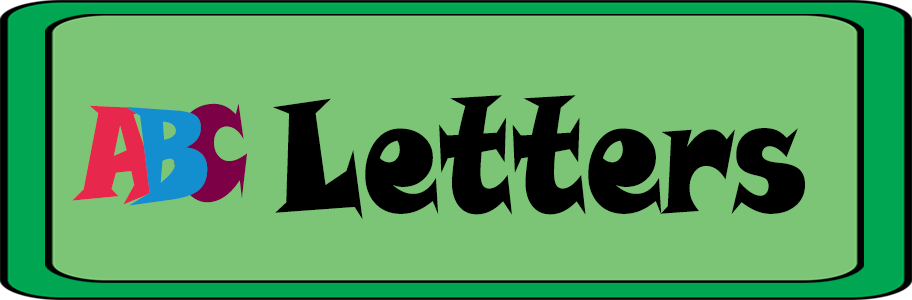
<style>
.page{position:relative;width:912px;height:300px;background:#7cc576}
.page>*{position:absolute;margin:0}
.t1{font:160px "SnapITC-Regular";color:#000000;scale:0.75 1}
.t2{font:130.8px "SnapITC-Regular";color:#e7274b;scale:0.75 1}
.t3{font:130.8px "SnapITC-Regular";color:#138fcf;scale:0.75 1}
.t4{font:130.8px "SnapITC-Regular";color:#7b0046;scale:0.75 1}
</style>
<div class="page">
<p class="t1" style="left:273px;top:95px;width:532px;height:124px">Letters</p>
<p class="t2" style="left:72px;top:105px;width:94px;height:100px">A</p>
<p class="t3" style="left:126px;top:107px;width:82px;height:99px">B</p>
<p class="t4" style="left:174px;top:103px;width:73px;height:100px">C</p>
</div>
